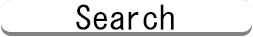
<style>
.page{position:relative;width:253px;height:37px;background:#ffffff}
.page>*{position:absolute;margin:0}
.t1{font:33.3px "MS-Gothic";color:#000000}
</style>
<div class="page">
<p class="t1" style="left:76px;top:4px;width:98px;height:26px">Search</p>
</div>
